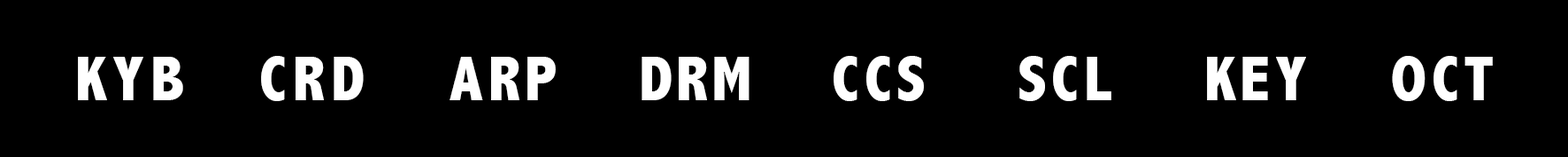
<style>
.page{position:relative;width:1568px;height:157px;background:#000000}
.page>*{position:absolute;margin:0}
.t1{font:63.7px "AbadiMT-CondensedExtraBold";letter-spacing:0.1em;color:#ffffff}
.t2{font:63.7px "AbadiMT-CondensedExtraBold";letter-spacing:0.08em;color:#ffffff}
.t3{font:63.7px "AbadiMT-CondensedExtraBold";letter-spacing:0.06em;color:#ffffff}
</style>
<div class="page">
<p class="t1" style="left:78px;top:57px;width:105px;height:43px">KYB</p>
<p class="t1" style="left:261px;top:56px;width:103px;height:45px">CRD</p>
<p class="t2" style="left:450px;top:57px;width:106px;height:43px">ARP</p>
<p class="t3" style="left:642px;top:57px;width:107px;height:43px">DRM</p>
<p class="t2" style="left:834px;top:56px;width:90px;height:45px">CCS</p>
<p class="t2" style="left:1019px;top:56px;width:92px;height:45px">SCL</p>
<p class="t2" style="left:1207px;top:57px;width:99px;height:43px">KEY</p>
<p class="t2" style="left:1392px;top:56px;width:101px;height:45px">OCT</p>
</div>
